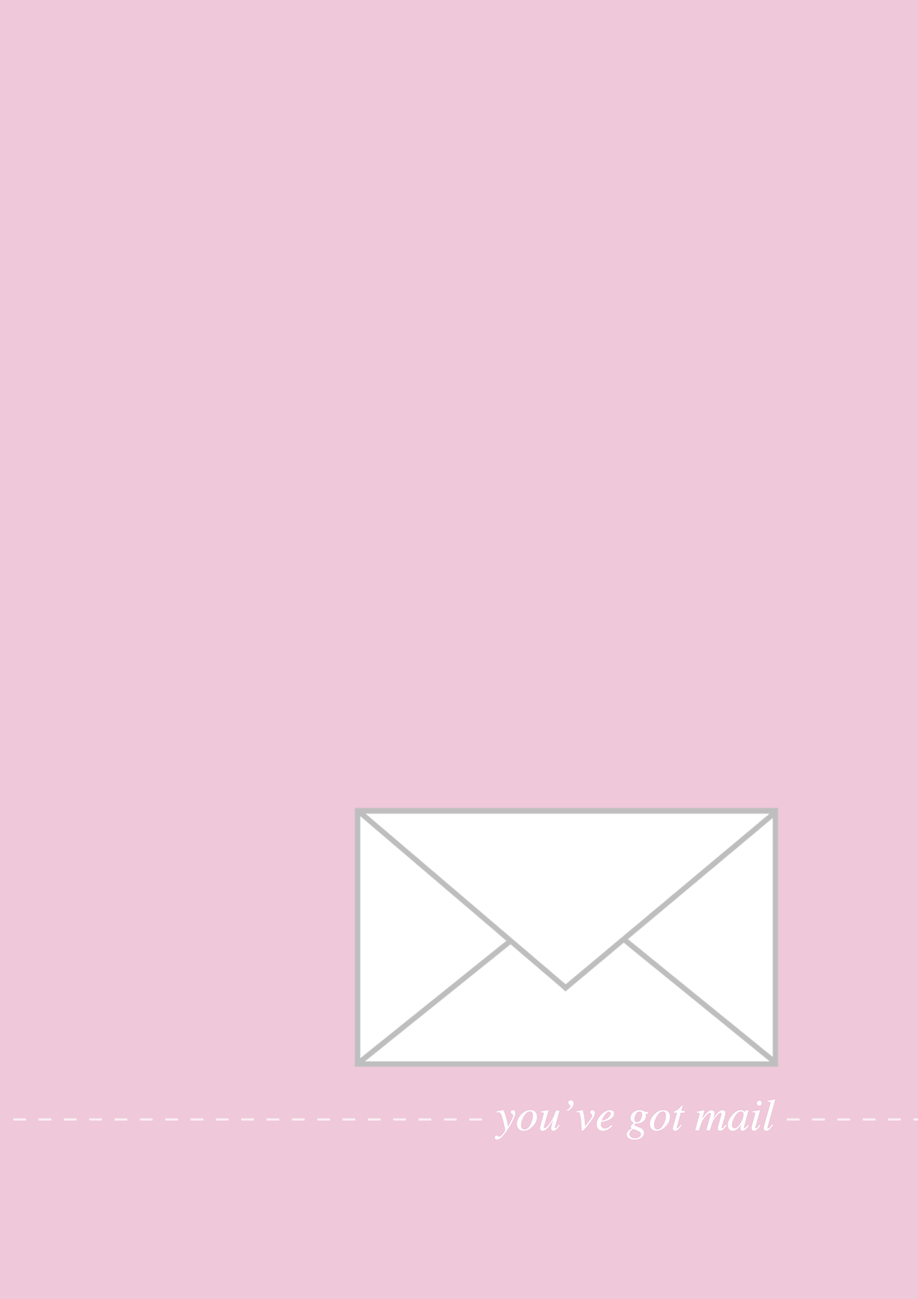
<style>
.page{position:relative;width:918px;height:1299px;background:#efc8d9}
.page>*{position:absolute;margin:0}
.t1{font:44.8px "Times-Italic";color:#fefefe}
</style>
<div class="page">
<p class="t1" style="left:495px;top:1099px;width:281px;height:40px">you’ve got mail</p>
</div>
